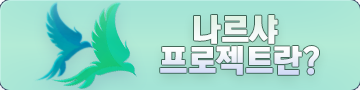
<style>
.page{position:relative;width:360px;height:90px}
.page>*{position:absolute;margin:0}
.t1{font:32px/30.6px "KoreanTITGD5-R";letter-spacing:-0.01em;color:#ffffff}
</style>
<div class="page">
<p class="t1" style="left:160px;top:15px;width:159px;height:60px;text-align:center">나르샤 <br>프로젝트란?</p>
<p class="t1" style="left:160px;top:15px;width:159px;height:60px;text-align:center">나르샤 <br>프로젝트란?</p>
</div>
